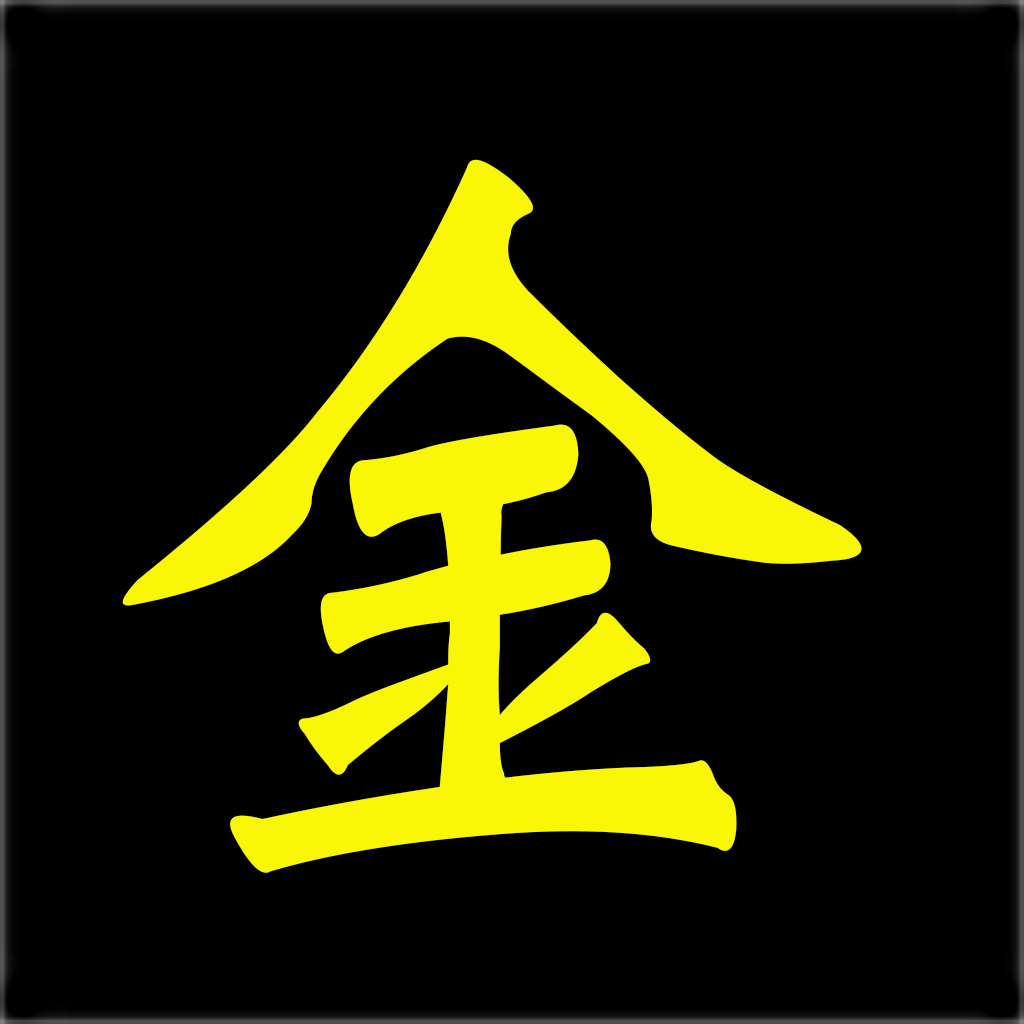
<style>
.page{position:relative;width:1024px;height:1024px;background:#000000}
.page>*{position:absolute;margin:0}
.t1{font:844.4px "Weibei-SC-Bold";color:#f9f607}
</style>
<div class="page">
<p class="t1" style="left:122px;top:159px;width:740px;height:714px">金</p>
</div>
